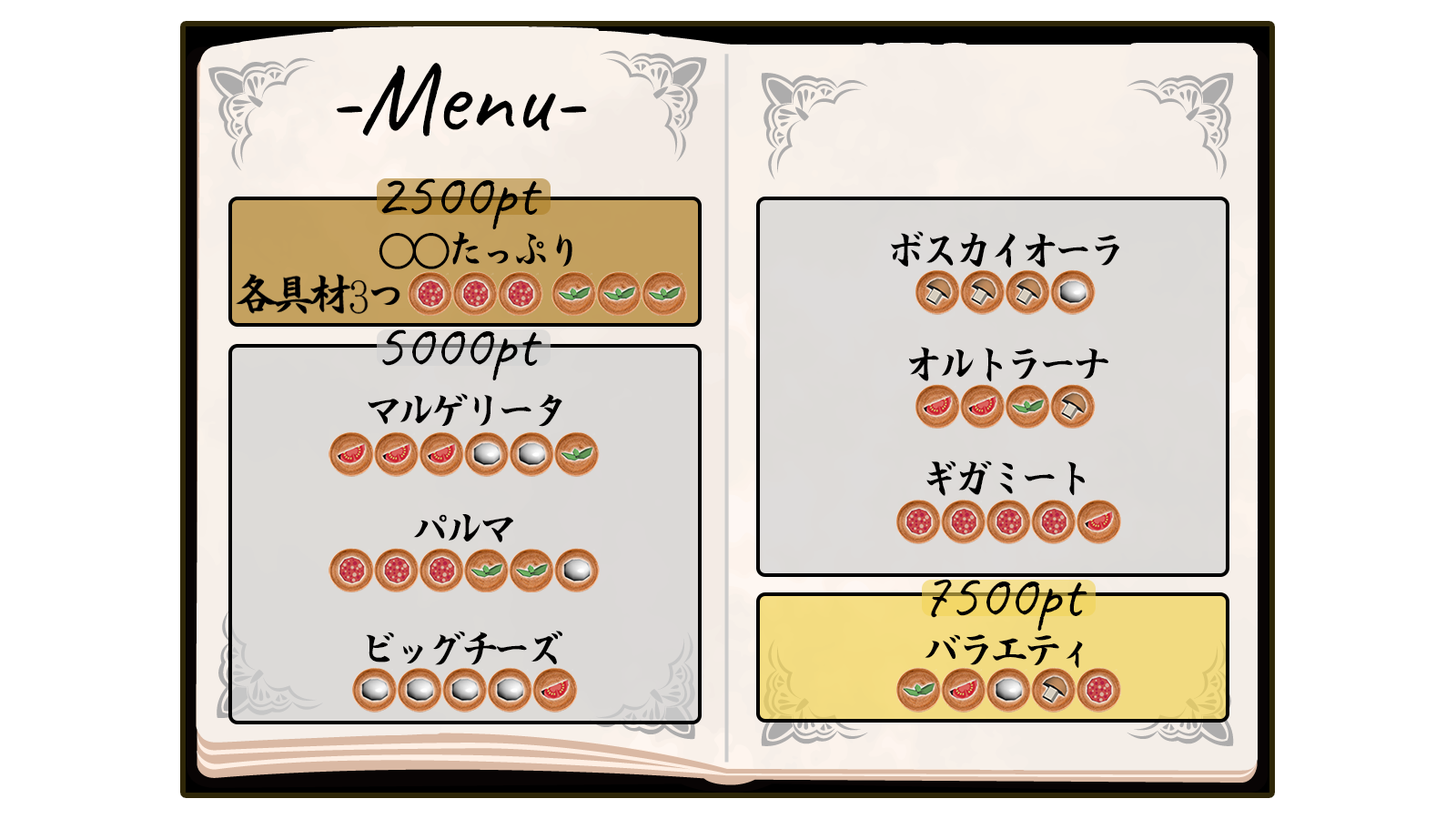
<style>
.page{position:relative;width:1456px;height:819px;background:#ffffff}
.page>*{position:absolute;margin:0}
.t1{font:102.4px "Caveat-Regular";color:#000000}
.t2{font:65px "Caveat-Regular";color:#000000}
.t3{font:43.3px "AB-doudoukaisyo";letter-spacing:-0.225em;color:#000000}
.t4{font:43.3px "UDDigiKyokashoNP-R";letter-spacing:-0.225em;color:#000000}
</style>
<div class="page">
<p class="t1" style="left:337px;top:63px;width:250px;height:73px">-Menu-</p>
<p class="t2" style="left:381px;top:178px;width:161px;height:51px">2500pt</p>
<p class="t3" style="left:379px;top:231px;width:193px;height:38px"><span class="t4">○○</span>たっぷり</p>
<p class="t3" style="left:891px;top:231px;width:228px;height:37px">ボスカイオーラ</p>
<p class="t2" style="left:382px;top:329px;width:160px;height:51px">5000pt</p>
<p class="t3" style="left:909px;top:347px;width:199px;height:35px">オルトラーナ</p>
<p class="t3" style="left:368px;top:393px;width:194px;height:34px">マルゲリータ</p>
<p class="t3" style="left:926px;top:460px;width:159px;height:36px">ギガミート</p>
<p class="t3" style="left:413px;top:514px;width:100px;height:28px">パルマ</p>
<p class="t2" style="left:931px;top:579px;width:156px;height:52px">7500pt</p>
<p class="t3" style="left:366px;top:631px;width:196px;height:34px">ビッグチーズ</p>
<p class="t3" style="left:925px;top:634px;width:158px;height:34px">バラエティ</p>
</div>
